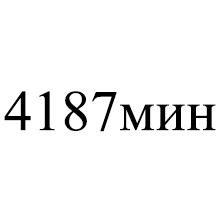
<style>
.page{position:relative;width:221px;height:221px;background:#ffffff}
.page>*{position:absolute;margin:0}
.t1{font:57.5px "TimesNewRomanPSMT";color:#000000}
</style>
<div class="page">
<p class="t1" style="left:4px;top:91px;width:212px;height:41px">4187мин</p>
</div>
